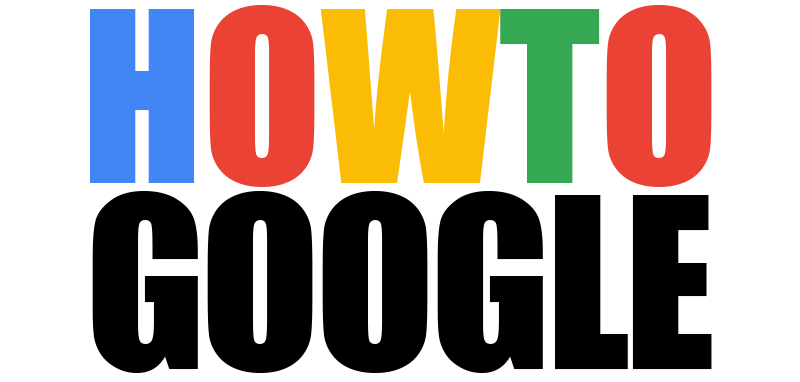
<style>
.page{position:relative;width:800px;height:382px;background:#ffffff}
.page>*{position:absolute;margin:0}
.t1{font:220px "Impact";letter-spacing:-0.005em;color:#4285f4}
.t2{font:220px "Impact";letter-spacing:-0.005em;color:#ea4335}
.t3{font:220px "Impact";letter-spacing:-0.005em;color:#fbbc05}
.t4{font:220px "Impact";letter-spacing:-0.005em;color:#34a853}
.t5{font:220px "Impact";letter-spacing:-0.025em;color:#000000}
</style>
<div class="page">
<p class="t1" style="left:90px;top:5px;width:622px;height:182px">H<span class="t2">O</span><span class="t3">W</span><span class="t4">T</span><span class="t2">O</span></p>
<p class="t5" style="left:92px;top:191px;width:620px;height:182px">GOOGLE</p>
</div>
